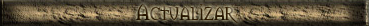
<style>
.page{position:relative;width:369px;height:26px}
.page>*{position:absolute;margin:0}
.t1{font:21px "Morpheus";color:#2e1b02}
</style>
<div class="page">
<p class="t1" style="left:135px;top:3px;width:105px;height:20px">Actualizar</p>
</div>
